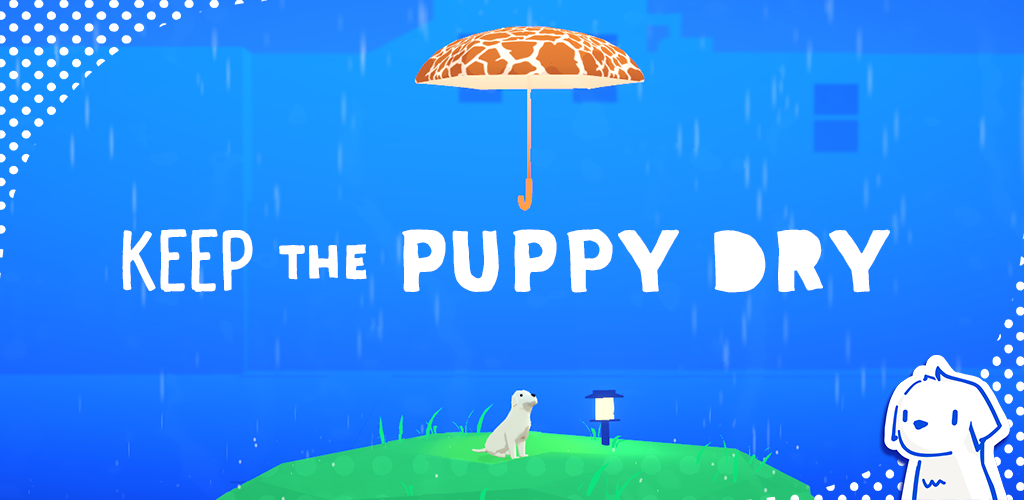
<style>
.page{position:relative;width:1024px;height:500px}
.page>*{position:absolute;margin:0}
.t1{font:90.2px "SDSans-Condensed";color:#ffffff}
.t2{font:90.2px "SDSans-FillOne";color:#ffffff}
.t3{font:90.2px "SDSans-FillTwo";color:#ffffff}
.t4{font:49.5px "SDSans-FillTwo";color:#ffffff}
</style>
<div class="page">
<p class="t1" style="left:122px;top:229px;width:131px;height:63px">KEEP</p>
<p class="t2" style="left:402px;top:229px;width:488px;height:64px">PUPPY <span class="t3">DRY</span></p>
<p class="t4" style="left:279px;top:244px;width:88px;height:36px">THE</p>
</div>
